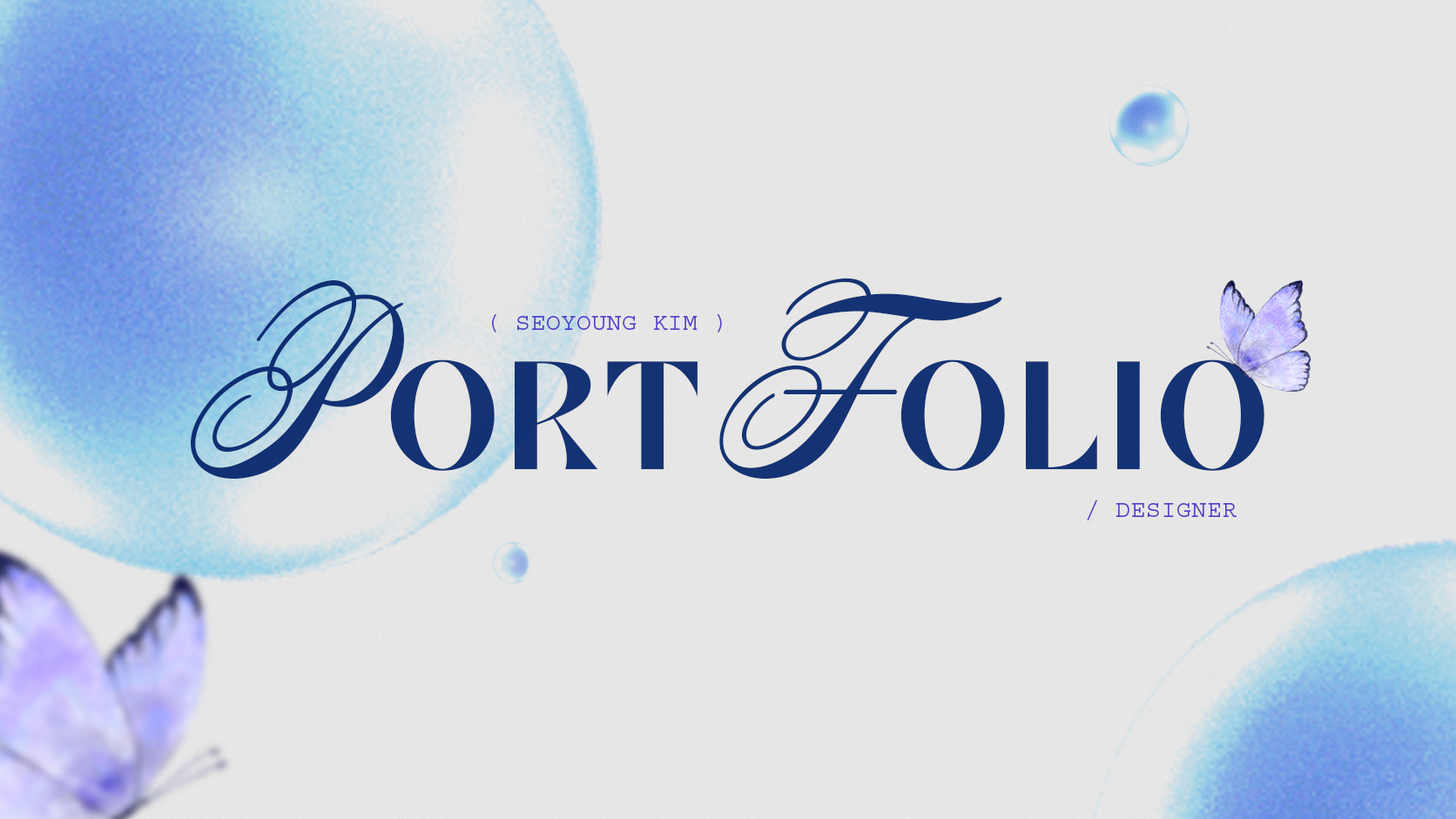
<style>
.page{position:relative;width:1456px;height:819px}
.page>*{position:absolute;margin:0}
.t1{font:240.2px "AcroterionJF";letter-spacing:0.03em;color:#143374}
.t2{font:24.2px "CourierStd";letter-spacing:0.03em;color:#553fc9}
.t3{font:149.5px "Caesura-Bold";letter-spacing:0.03em;color:#143374}
</style>
<div class="page">
<p class="t1" style="left:191px;top:280px;width:213px;height:200px">P</p>
<p class="t1" style="left:719px;top:278px;width:283px;height:202px">F</p>
<p class="t2" style="left:492px;top:314px;width:230px;height:19px">( SEOYOUNG KIM )</p>
<p class="t3" style="left:390px;top:360px;width:307px;height:111px">ORT</p>
<p class="t3" style="left:900px;top:360px;width:364px;height:111px">OLIO</p>
<p class="t2" style="left:1086px;top:500px;width:150px;height:21px">/ DESIGNER</p>
</div>
